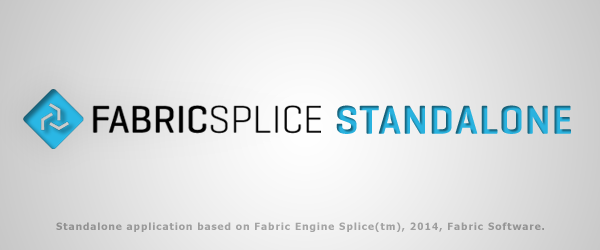
<style>
.page{position:relative;width:600px;height:250px}
.page>*{position:absolute;margin:0}
.t1{font:41.1px "Geogrotesque-SemiBold";letter-spacing:0.025em}
.t2{font:10px "Tahoma-Bold";letter-spacing:0.1em;color:#9d9d9d}
</style>
<div class="page">
<p class="t1" style="left:336px;top:105px;width:235px;height:29px">STANDALONE</p>
<p class="t2" style="left:56px;top:222px;width:488px;height:10px">Standalone application based on Fabric Engine Splice(tm), 2014, Fabric Software.</p>
</div>
